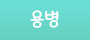
<style>
.page{position:relative;width:90px;height:40px}
.page>*{position:absolute;margin:0}
.t1{font:17.8px "MaplestoryLight";color:#ffffff}
</style>
<div class="page">
<p class="t1" style="left:30px;top:10px;width:29px;height:18px">용병</p>
</div>
